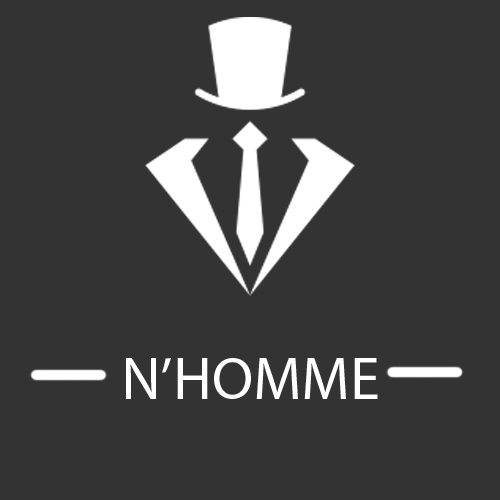
<style>
.page{position:relative;width:500px;height:500px;background:#333333}
.page>*{position:absolute;margin:0}
.t1{font:60px "MyriadPro-Regular";color:#ffffff}
</style>
<div class="page">
<p class="t1" style="left:126px;top:358px;width:252px;height:41px">N’HOMME</p>
</div>
